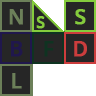
<style>
.page{position:relative;width:96px;height:96px;background:#262626}
.page>*{position:absolute;margin:0}
.t1{font:21px "OpenSans-SemiBold";color:#6c8059;font-weight:bold}
.t2{font:16px "OpenSans-SemiBold";color:#85cc3d;font-weight:bold}
.t3{font:21px "OpenSans-SemiBold";color:#85cc3d;font-weight:bold}
.t4{font:21px "OpenSans-SemiBold";color:#20174d;font-weight:bold}
.t5{font:21px "OpenSans-SemiBold";color:#0f3321;font-weight:bold}
.t6{font:21px "OpenSans-SemiBold";color:#cc3d55;font-weight:bold}
</style>
<div class="page">
<p class="t1" style="left:9px;top:9px;width:14px;height:16px">N</p>
<p class="t2" style="left:36px;top:16px;width:9px;height:13px">S</p>
<p class="t3" style="left:75px;top:9px;width:11px;height:16px">S</p>
<p class="t4" style="left:11px;top:41px;width:12px;height:16px">B</p>
<p class="t5" style="left:44px;top:41px;width:10px;height:16px">F</p>
<p class="t6" style="left:74px;top:41px;width:13px;height:16px">D</p>
<p class="t1" style="left:12px;top:73px;width:10px;height:16px">L</p>
</div>
